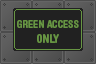
<style>
.page{position:relative;width:96px;height:64px;background:#212121}
.page>*{position:absolute;margin:0}
.t1{font:10.7px "HelveticaRoundedLTStd-BdCn";color:#679543}
.t2{font:12px "HelveticaRoundedLTStd-BdCn";color:#679543}
</style>
<div class="page">
<p class="t1" style="left:17px;top:20px;width:62px;height:23px;text-align:center">GREEN ACCESS<br><span class="t2">ONLY</span></p>
</div>
